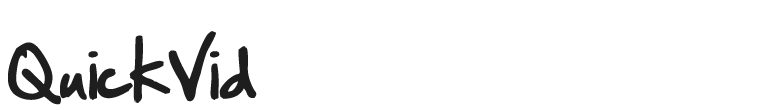
<style>
.page{position:relative;width:782px;height:110px;background:#ffffff}
.page>*{position:absolute;margin:0}
.t1{font:61.5px "Hand-Of-Sean";color:#1e1e1e}
</style>
<div class="page">
<p class="t1" style="left:8px;top:31px;width:249px;height:74px">QuickVid</p>
</div>
